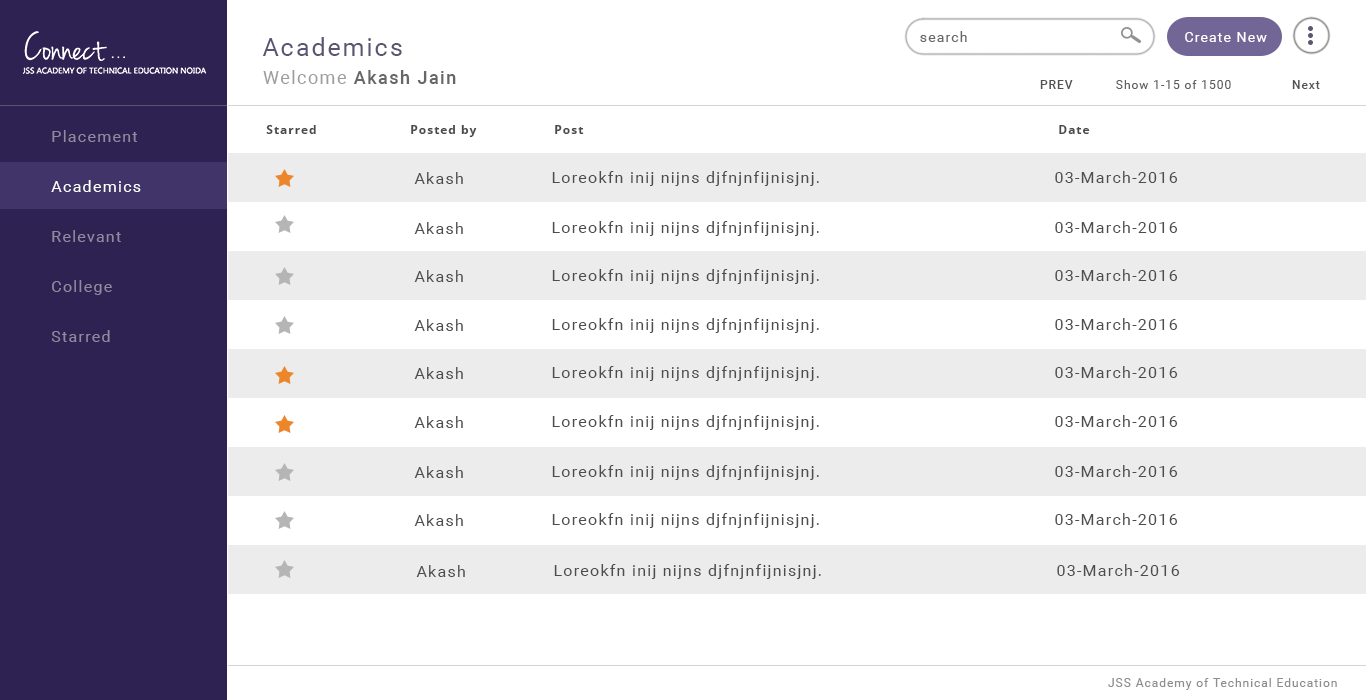
<style>
.page{position:relative;width:1366px;height:700px;background:#ffffff}
.page>*{position:absolute;margin:0}
.t1{font:25px "Roboto-Regular";letter-spacing:0.08em;color:#5d5473}
.t2{font:14px "Roboto-Regular";letter-spacing:0.08em;color:#676767}
.t3{font:14px "Roboto-Regular";letter-spacing:0.08em;color:#ffffff}
.t4{font:18.4px "Roboto-Medium";letter-spacing:0.08em;color:#676767}
.t5{font:18.4px "Roboto-Regular";letter-spacing:0.08em;color:#9d9d9d}
.t6{font:12px "Roboto-Regular";letter-spacing:0.08em;color:#5f5f5f}
.t7{font:12px "Roboto-Medium";letter-spacing:0.08em;color:#525252}
.t8{font:12px "NotoSans-Bold";letter-spacing:0.08em;color:#4b4b4b}
.t9{font:16px/50px "Roboto-Regular";letter-spacing:0.08em;color:#908a9f}
.t10{font:16px/50px "Roboto-Regular";letter-spacing:0.08em;color:#fefefe}
.t11{font:16px "Roboto-Regular";letter-spacing:0.08em;color:#4d4d4d}
.t12{font:12px "Roboto-Regular";letter-spacing:0.08em;color:#8e8e8e}
</style>
<div class="page">
<p class="t1" style="left:262px;top:37px;width:140px;height:19px">Academics</p>
<p class="t2" style="left:920px;top:31px;width:47px;height:11px">search</p>
<p class="t3" style="left:1185px;top:32px;width:82px;height:10px">Create New</p>
<p class="t4" style="left:263px;top:70px;width:193px;height:14px"><span class="t5">Welcome </span>Akash Jain</p>
<p class="t6" style="left:1040px;top:80px;width:280px;height:9px"><span class="t7">PREV</span>   Show 1-15 of 1500  <span class="t7">Next</span></p>
<p class="t8" style="left:266px;top:125px;width:824px;height:12px">Starred   Posted by   Post              Date</p>
<p class="t9" style="left:51px;top:130px;width:90px;height:212px">Placement<br><span class="t10">Academics<br></span>Relevant<br>College<br>Starred</p>
<p class="t11" style="left:414px;top:172px;width:49px;height:12px">Akash</p>
<p class="t11" style="left:552px;top:171px;width:267px;height:15px">Loreokfn inij nijns djfnjnfijnisjnj.</p>
<p class="t11" style="left:1055px;top:171px;width:123px;height:12px">03-March-2016</p>
<p class="t11" style="left:414px;top:222px;width:49px;height:12px">Akash</p>
<p class="t11" style="left:552px;top:221px;width:267px;height:15px">Loreokfn inij nijns djfnjnfijnisjnj.</p>
<p class="t11" style="left:1055px;top:221px;width:123px;height:12px">03-March-2016</p>
<p class="t11" style="left:414px;top:270px;width:49px;height:12px">Akash</p>
<p class="t11" style="left:552px;top:269px;width:267px;height:15px">Loreokfn inij nijns djfnjnfijnisjnj.</p>
<p class="t11" style="left:1055px;top:269px;width:123px;height:12px">03-March-2016</p>
<p class="t11" style="left:552px;top:318px;width:267px;height:15px">Loreokfn inij nijns djfnjnfijnisjnj.</p>
<p class="t11" style="left:1055px;top:318px;width:123px;height:12px">03-March-2016</p>
<p class="t11" style="left:414px;top:319px;width:49px;height:12px">Akash</p>
<p class="t11" style="left:552px;top:366px;width:267px;height:15px">Loreokfn inij nijns djfnjnfijnisjnj.</p>
<p class="t11" style="left:1055px;top:366px;width:123px;height:12px">03-March-2016</p>
<p class="t11" style="left:414px;top:367px;width:49px;height:12px">Akash</p>
<p class="t11" style="left:414px;top:416px;width:49px;height:12px">Akash</p>
<p class="t11" style="left:552px;top:415px;width:267px;height:15px">Loreokfn inij nijns djfnjnfijnisjnj.</p>
<p class="t11" style="left:1055px;top:415px;width:123px;height:12px">03-March-2016</p>
<p class="t11" style="left:414px;top:466px;width:49px;height:12px">Akash</p>
<p class="t11" style="left:552px;top:465px;width:267px;height:15px">Loreokfn inij nijns djfnjnfijnisjnj.</p>
<p class="t11" style="left:1055px;top:465px;width:123px;height:12px">03-March-2016</p>
<p class="t11" style="left:414px;top:514px;width:49px;height:12px">Akash</p>
<p class="t11" style="left:552px;top:513px;width:267px;height:15px">Loreokfn inij nijns djfnjnfijnisjnj.</p>
<p class="t11" style="left:1055px;top:513px;width:123px;height:12px">03-March-2016</p>
<p class="t11" style="left:416px;top:565px;width:49px;height:12px">Akash</p>
<p class="t11" style="left:554px;top:564px;width:267px;height:15px">Loreokfn inij nijns djfnjnfijnisjnj.</p>
<p class="t11" style="left:1057px;top:564px;width:123px;height:12px">03-March-2016</p>
<p class="t12" style="left:1108px;top:678px;width:229px;height:12px">JSS Academy of Technical Education</p>
</div>
